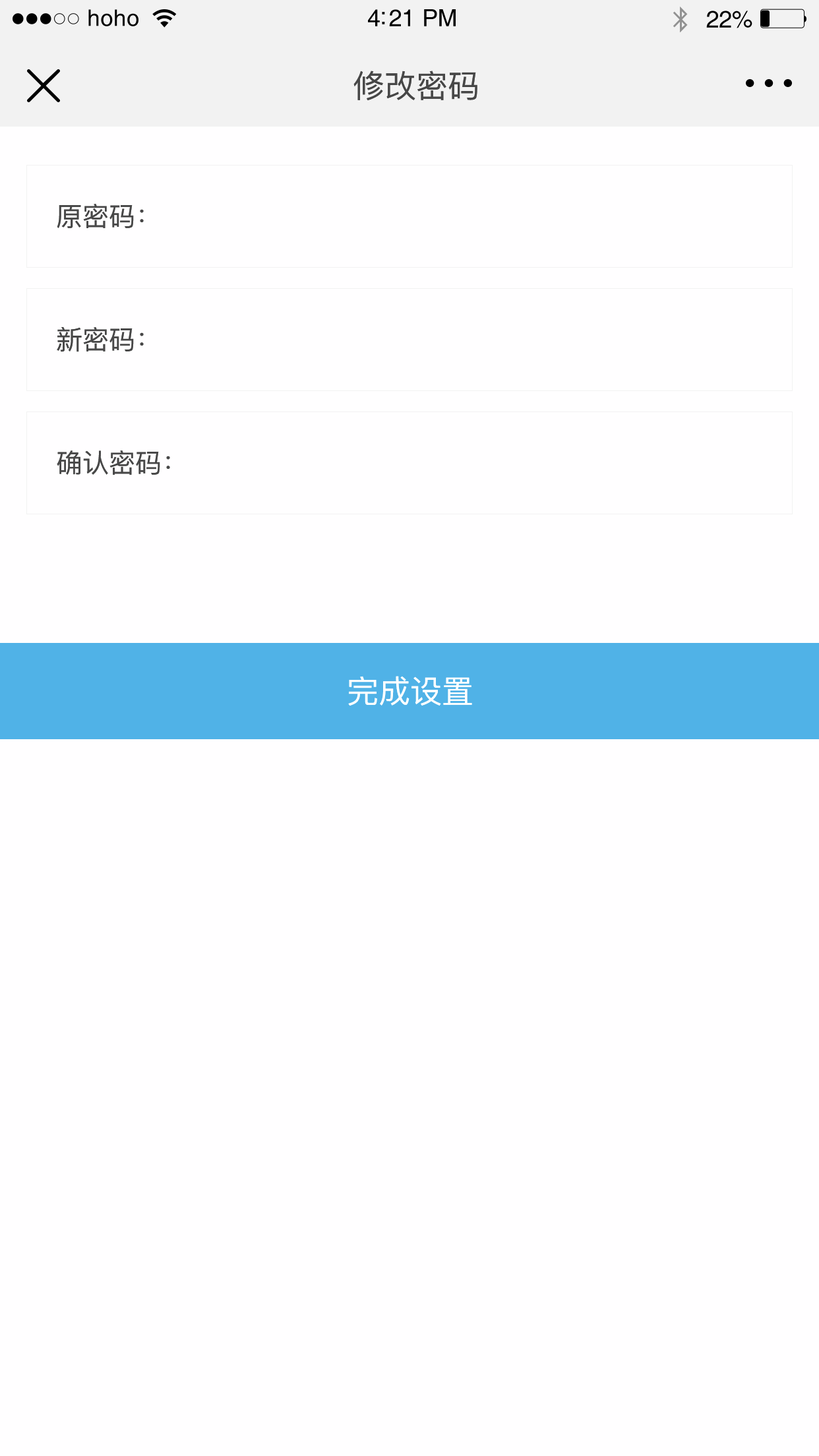
<style>
.page{position:relative;width:819px;height:1456px;background:#fffeff}
.page>*{position:absolute;margin:0}
.t1{font:22.8px "Helvetica";letter-spacing:0.02em;color:#000000}
.t2{font:23.8px "Helvetica";letter-spacing:-0.02em;color:#000000}
.t3{font:31.7px "PingFang-SC-Medium";color:#474747}
.t4{font:26.4px "PingFang-SC-Medium";color:#474747}
.t5{font:31.7px "PingFang-SC-Medium";color:#ffffff}
</style>
<div class="page">
<p class="t1" style="left:88px;top:9px;width:50px;height:17px">hoho</p>
<p class="t2" style="left:368px;top:9px;width:88px;height:17px">4:21 PM</p>
<p class="t2" style="left:706px;top:11px;width:46px;height:17px">22%</p>
<p class="t3" style="left:353px;top:71px;width:124px;height:30px">修改密码</p>
<p class="t4" style="left:57px;top:204px;width:87px;height:24px">原密码：</p>
<p class="t4" style="left:57px;top:326px;width:87px;height:26px">新密码：</p>
<p class="t4" style="left:57px;top:450px;width:113px;height:25px">确认密码：</p>
<p class="t5" style="left:348px;top:676px;width:124px;height:30px">完成设置</p>
</div>
